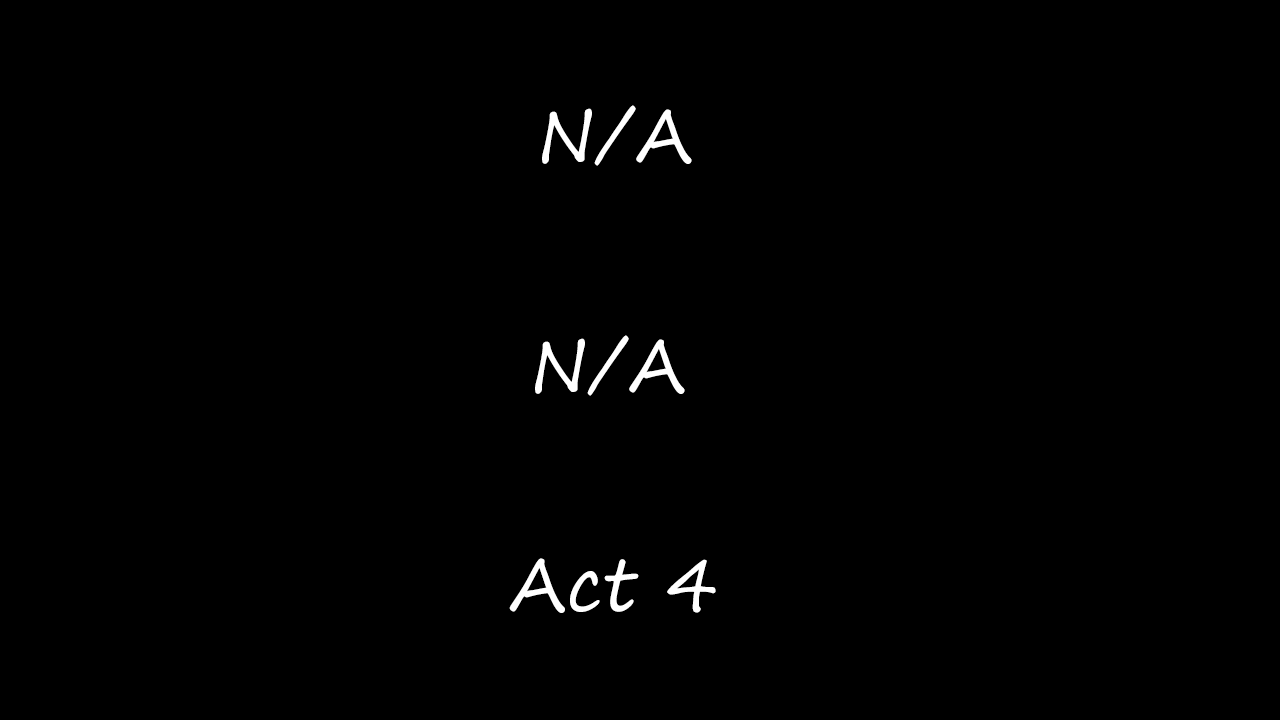
<style>
.page{position:relative;width:1280px;height:720px;background:#000000}
.page>*{position:absolute;margin:0}
.t1{font:72px "SegoePrint";color:#ffffff}
</style>
<div class="page">
<p class="t1" style="left:542px;top:105px;width:150px;height:61px">N/A</p>
<p class="t1" style="left:535px;top:335px;width:150px;height:61px">N/A</p>
<p class="t1" style="left:509px;top:558px;width:207px;height:55px">Act 4</p>
</div>
